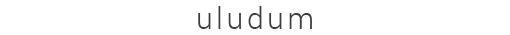
<style>
.page{position:relative;width:510px;height:35px;background:#ffffff}
.page>*{position:absolute;margin:0}
.t1{font:30px "Roboto-Light";letter-spacing:0.12em;color:#3d3d3d}
</style>
<div class="page">
<p class="t1" style="left:198px;top:6px;width:114px;height:23px">uludum</p>
</div>
